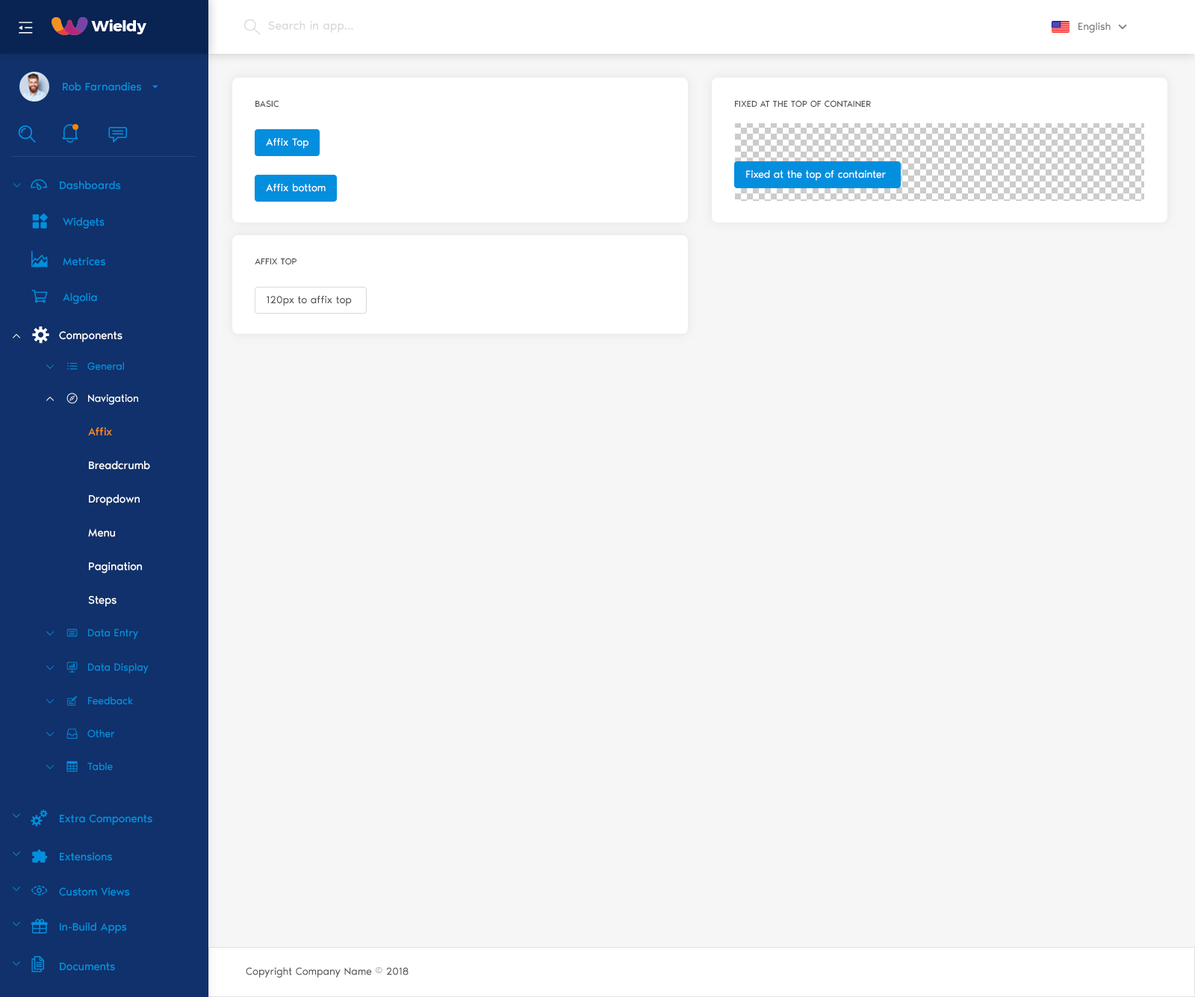
<style>
.page{position:relative;width:1195px;height:997px;background:#f6f6f6}
.page>*{position:absolute;margin:0}
.t1{font:12px "NoirPro-Regular";color:#d9d9d9}
.t2{font:10.5px "NoirPro-Regular";color:#757575}
.t3{font:11.2px "NoirPro-Regular";color:#038fde}
.t4{font:9px "NoirPro-Regular";color:#535353;text-transform:uppercase}
.t5{font:10.5px "NoirPro-Regular";color:#ffffff}
.t6{font:9px "gaxonant"}
.t7{font:16.4px "gaxonant";color:#038fde}
.t8{font:10.5px "NoirPro-Regular";color:#535353}
.t9{font:16.4px "gaxonant";color:#ffffff}
.t10{font:11.2px "NoirPro-Regular";color:#ffffff}
.t11{font:9px "gaxonant";color:#038fde}
.t12{font:10.5px "gaxonant";color:#038fde}
.t13{font:10.5px "NoirPro-Regular";color:#038fde}
.t14{font:11.2px/29.9px "NoirPro-Regular";color:#ffffff}
.t15{font:11.2px/29.9px "NoirPro-Regular";color:#fa8c16}
.t16{font:8.7px "gaxonant";color:#038fde}
.t17{font:10.5px "NoirPro-Regular";color:#595959}
</style>
<div class="page">
<p class="t1" style="left:268px;top:21px;width:85px;height:12px">Search in app...</p>
<p class="t2" style="left:1079px;top:22px;width:32px;height:11px">English</p>
<p class="t3" style="left:63px;top:82px;width:78px;height:9px">Rob Farnandies</p>
<p class="t4" style="left:256px;top:100px;width:23px;height:8px">Basic</p>
<p class="t4" style="left:735px;top:100px;width:136px;height:8px">Fixed at the top of container</p>
<p class="t5" style="left:266px;top:138px;width:43px;height:11px">Affix Top</p>
<p class="t5" style="left:746px;top:170px;width:140px;height:11px">Fixed at the top of containter</p>
<p class="t6" style="left:13px;top:183px;width:8px;height:5px">2</p>
<p class="t7" style="left:31px;top:179px;width:16px;height:12px">-</p>
<p class="t3" style="left:60px;top:181px;width:61px;height:9px">Dashboards</p>
<p class="t5" style="left:266px;top:184px;width:60px;height:8px">Affix bottom</p>
<p class="t3" style="left:63px;top:217px;width:42px;height:12px">Widgets</p>
<p class="t7" style="left:31px;top:251px;width:17px;height:16px">m</p>
<p class="t3" style="left:63px;top:257px;width:42px;height:9px">Metrices</p>
<p class="t4" style="left:255px;top:258px;width:42px;height:7px">Affix top</p>
<p class="t3" style="left:63px;top:293px;width:34px;height:11px">Algolia</p>
<p class="t8" style="left:267px;top:296px;width:85px;height:10px">120px to affix top</p>
<p class="t9" style="left:32px;top:327px;width:17px;height:17px">%</p>
<p class="t6" style="left:13px;top:334px;width:7px;height:4px">5</p>
<p class="t10" style="left:59px;top:331px;width:64px;height:11px">Components</p>
<p class="t11" style="left:46px;top:365px;width:8px;height:4px">2</p>
<p class="t12" style="left:67px;top:362px;width:11px;height:8px">h</p>
<p class="t13" style="left:87px;top:362px;width:37px;height:9px">General</p>
<p class="t6" style="left:46px;top:397px;width:8px;height:4px">5</p>
<p class="t5" style="left:88px;top:395px;width:50px;height:10px">Navigation</p>
<p class="t14" style="left:88px;top:427px;width:62px;height:180px"><span class="t15">Affix<br></span>Breadcrumb<br>Dropdown<br>Menu<br>Pagination<br>Steps</p>
<p class="t12" style="left:66px;top:629px;width:12px;height:8px">/</p>
<p class="t13" style="left:88px;top:629px;width:50px;height:11px">Data Entry</p>
<p class="t11" style="left:46px;top:631px;width:8px;height:5px">2</p>
<p class="t11" style="left:46px;top:666px;width:8px;height:4px">2</p>
<p class="t12" style="left:66px;top:662px;width:12px;height:11px">.</p>
<p class="t13" style="left:88px;top:663px;width:61px;height:11px">Data Display</p>
<p class="t11" style="left:46px;top:699px;width:8px;height:5px">2</p>
<p class="t13" style="left:88px;top:697px;width:45px;height:8px">Feedback</p>
<p class="t11" style="left:46px;top:732px;width:8px;height:5px">2</p>
<p class="t13" style="left:87px;top:730px;width:27px;height:8px">Other</p>
<p class="t11" style="left:46px;top:765px;width:8px;height:5px">2</p>
<p class="t13" style="left:87px;top:763px;width:26px;height:8px">Table</p>
<p class="t16" style="left:13px;top:814px;width:7px;height:4px">2</p>
<p class="t3" style="left:60px;top:814px;width:92px;height:12px">Extra Components</p>
<p class="t16" style="left:13px;top:852px;width:7px;height:4px">2</p>
<p class="t3" style="left:60px;top:853px;width:52px;height:8px">Extensions</p>
<p class="t16" style="left:13px;top:887px;width:7px;height:4px">2</p>
<p class="t7" style="left:31px;top:885px;width:16px;height:11px">,</p>
<p class="t3" style="left:59px;top:888px;width:71px;height:9px">Custom Views</p>
<p class="t16" style="left:13px;top:922px;width:7px;height:4px">2</p>
<p class="t3" style="left:60px;top:923px;width:67px;height:11px">In-Build Apps</p>
<p class="t16" style="left:13px;top:962px;width:7px;height:4px">2</p>
<p class="t7" style="left:31px;top:956px;width:13px;height:17px">)</p>
<p class="t3" style="left:60px;top:963px;width:55px;height:8px">Documents</p>
<p class="t17" style="left:246px;top:968px;width:163px;height:10px">Copyright Company Name © 2018</p>
</div>
